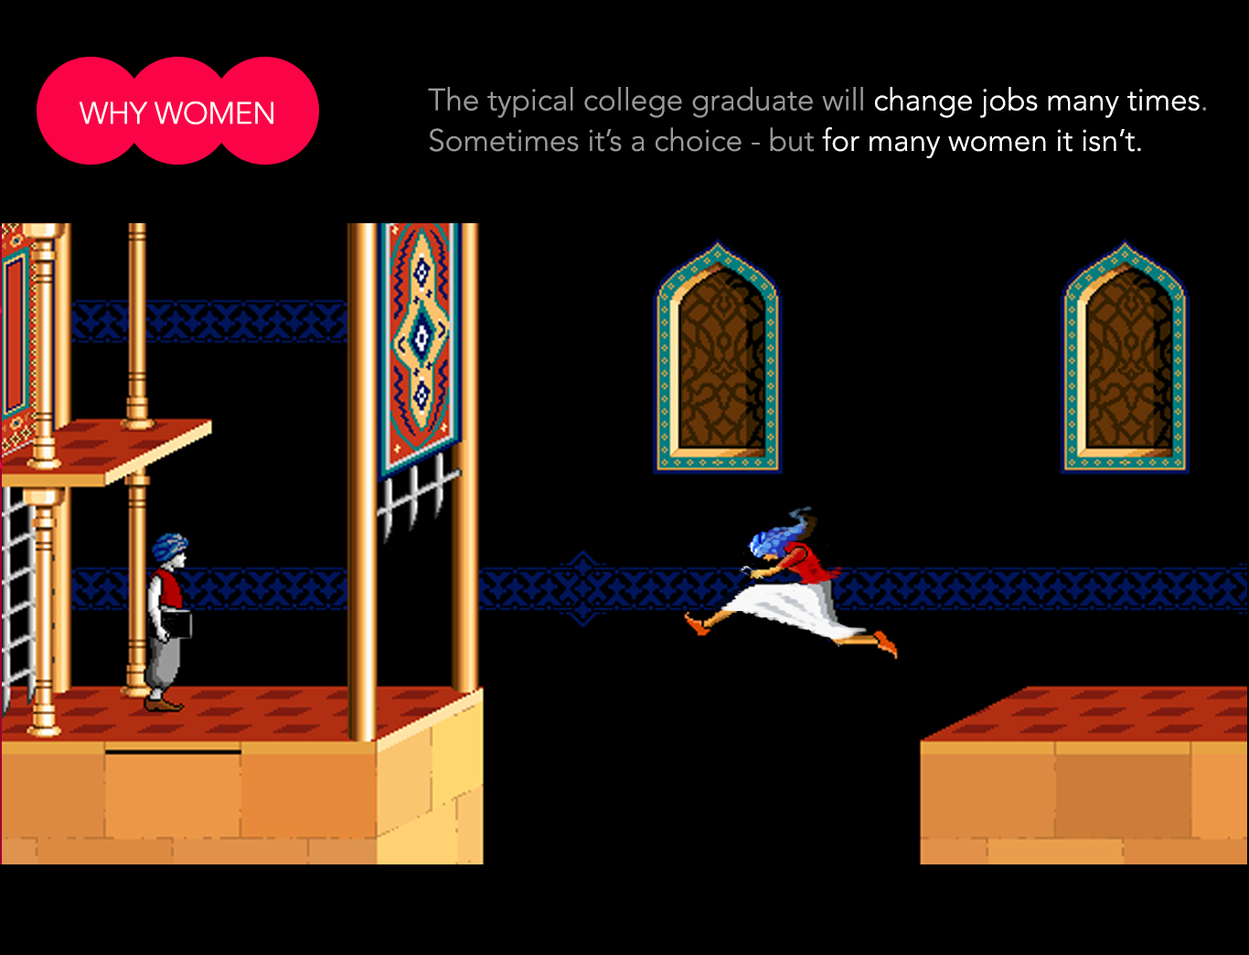
<style>
.page{position:relative;width:1249px;height:955px;background:#000000}
.page>*{position:absolute;margin:0}
.t1{font:30.5px/40.6px "Avenir-Light";color:#999999}
.t2{font:30.5px/40.6px "Avenir-Light";color:#ffffff}
.t3{font:30.5px "Avenir-Light";letter-spacing:-0.01em;color:#ffffff;text-transform:uppercase}
</style>
<div class="page">
<p class="t1" style="left:428px;top:87px;width:778px;height:71px">The typical college graduate will <span class="t2">change jobs many times</span>. Sometimes it’s a choice - but<span class="t2"> for many women it isn’t.</span></p>
<p class="t3" style="left:80px;top:101px;width:193px;height:23px">WHY WOMEN</p>
</div>
